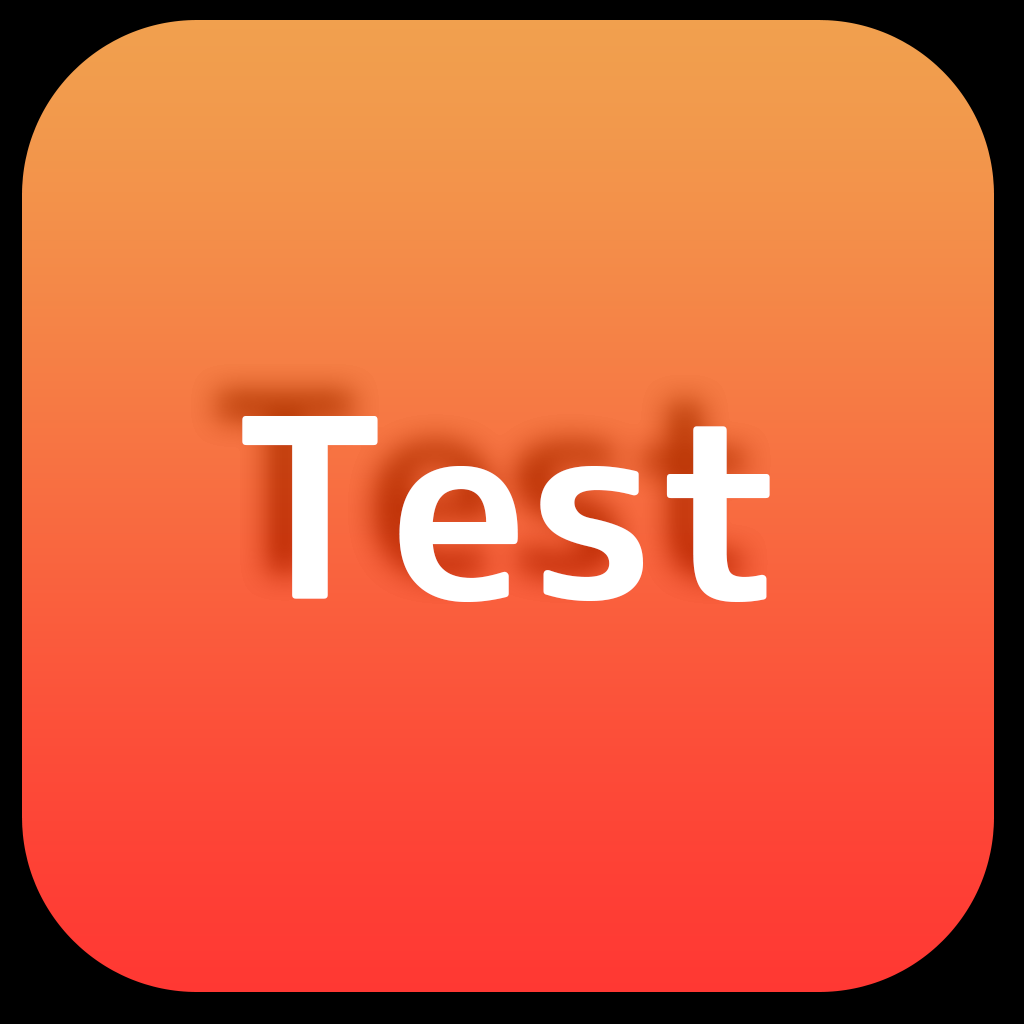
<style>
.page{position:relative;width:1024px;height:1024px}
.page>*{position:absolute;margin:0}
.t1{font:250px "07YasashisaGothicBold";color:#ffffff}
.t2{font:36px "07YasashisaGothicBold";color:#ffffff}
</style>
<div class="page">
<p class="t1" style="left:242px;top:416px;width:528px;height:186px"><span class="t2"><br><br><br><br><br><br><br></span>Test</p>
</div>
